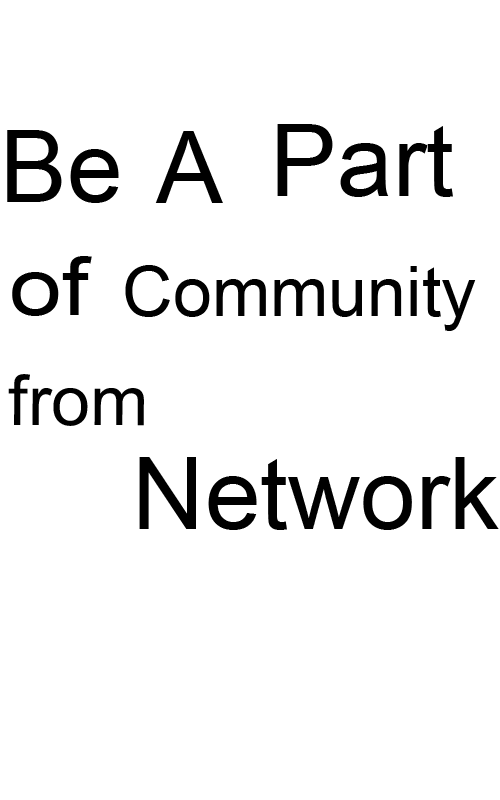
<style>
.page{position:relative;width:500px;height:800px;background:#ffffff}
.page>*{position:absolute;margin:0}
.t1{font:100px "ArialMT";color:#000000}
.t2{font:80px "ArialMT";color:#000000;scale:1.19 1}
.t3{font:70px "ArialMT";color:#000000}
</style>
<div class="page">
<p class="t1" style="left:277px;top:124px;width:176px;height:73px">Part</p>
<p class="t1" style="left:7px;top:130px;width:112px;height:73px">Be</p>
<p class="t1" style="left:155px;top:131px;width:68px;height:72px">A</p>
<p class="t2" style="left:12px;top:256px;width:80px;height:60px">of</p>
<p class="t3" style="left:125px;top:265px;width:351px;height:66px">Community</p>
<p class="t3" style="left:8px;top:374px;width:136px;height:52px">from</p>
<p class="t1" style="left:139px;top:457px;width:360px;height:73px">Network</p>
</div>
